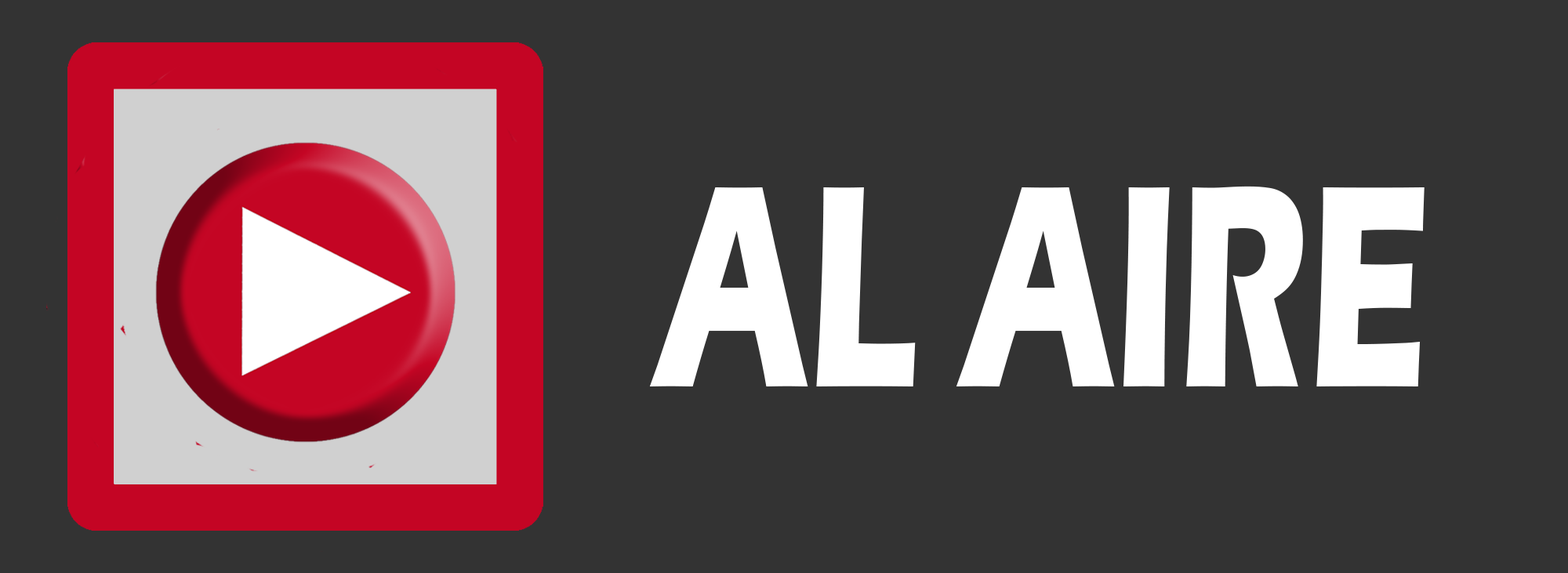
<style>
.page{position:relative;width:1568px;height:573px;background:#333333}
.page>*{position:absolute;margin:0}
.t1{font:298.6px "ErasITC-Bold";color:#ffffff;scale:0.62 1}
</style>
<div class="page">
<p class="t1" style="left:649px;top:186px;width:776px;height:201px">AL AIRE</p>
</div>
